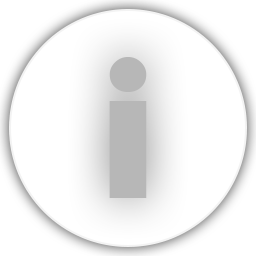
<style>
.page{position:relative;width:256px;height:256px;background:#ffffff}
.page>*{position:absolute;margin:0}
.t1{font:200px "Bauhaus93";color:#b7b7b7}
</style>
<div class="page">
<p class="t1" style="left:109px;top:57px;width:38px;height:141px">i</p>
</div>
